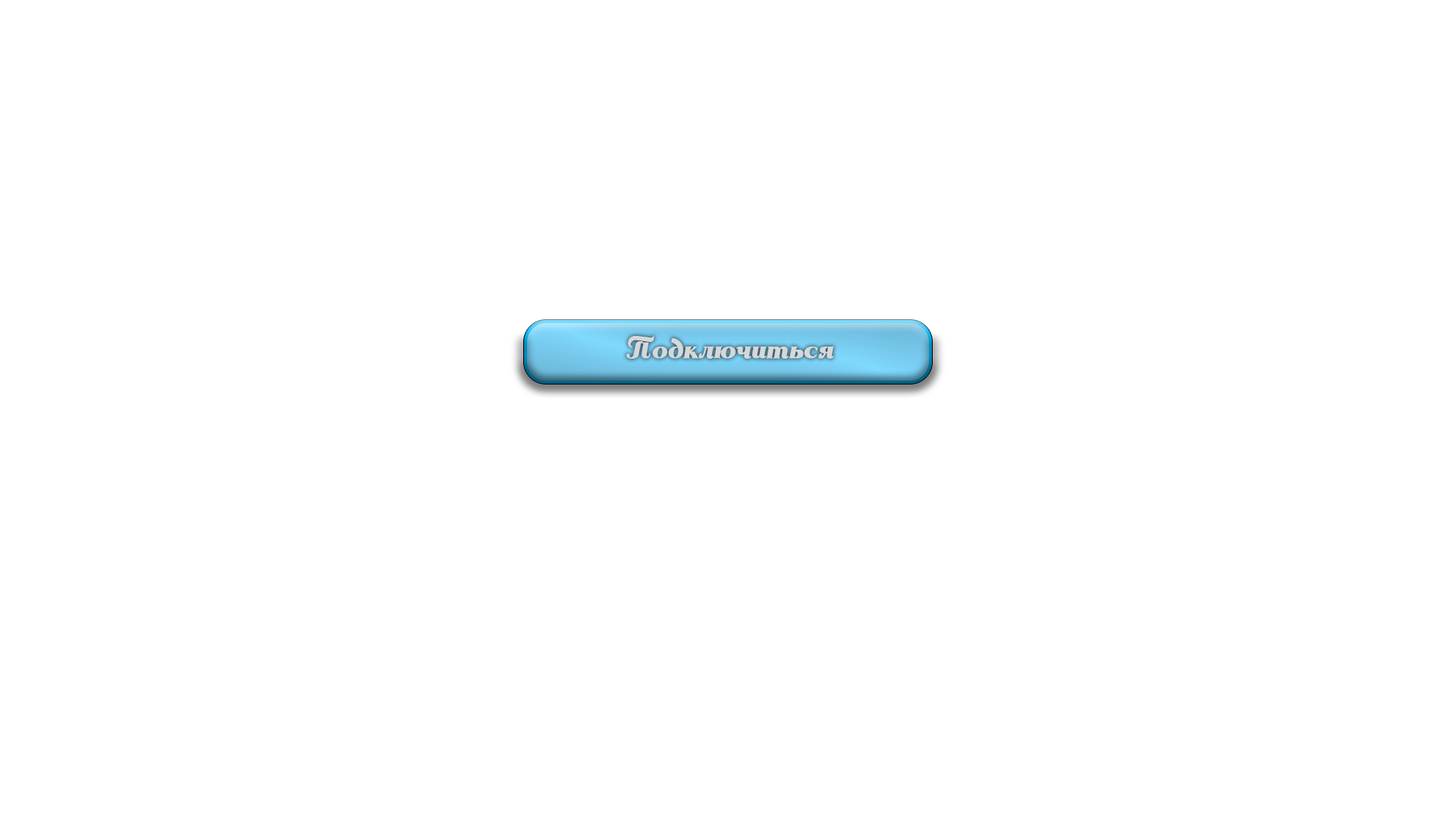
<style>
.page{position:relative;width:1456px;height:819px;background:#ffffff}
.page>*{position:absolute;margin:0}
.t1{font:30.3px "RhythmandJazz";color:#d5d8d8;font-weight:bold}
</style>
<div class="page">
<p class="t1" style="left:626px;top:336px;width:208px;height:23px">Подключиться</p>
</div>
